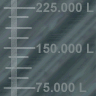
<style>
.page{position:relative;width:96px;height:96px}
.page>*{position:absolute;margin:0}
.t1{font:13px "Arial-BoldMT";color:#7b8687}
</style>
<div class="page">
<p class="t1" style="left:36px;top:2px;width:58px;height:10px">225.000 L</p>
<p class="t1" style="left:36px;top:43px;width:58px;height:10px">150.000 L</p>
<p class="t1" style="left:36px;top:82px;width:51px;height:10px">75.000 L</p>
</div>
